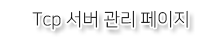
<style>
.page{position:relative;width:215px;height:37px;background:#ffffff}
.page>*{position:absolute;margin:0}
.t1{font:18px "NanumSquareL";color:#000000}
</style>
<div class="page">
<p class="t1" style="left:32px;top:10px;width:156px;height:20px">Tcp 서버 관리 페이지</p>
</div>
